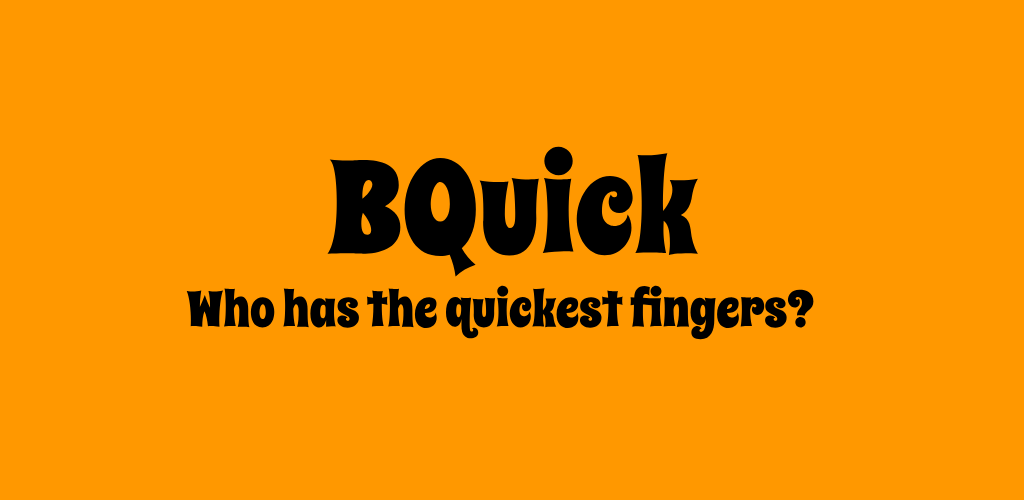
<style>
.page{position:relative;width:1024px;height:500px;background:#ff9800}
.page>*{position:absolute;margin:0}
.t1{font:130px "SpicyRice-Regular";color:#000000}
.t2{font:50px "SpicyRice-Regular";color:#000000}
</style>
<div class="page">
<p class="t1" style="left:327px;top:146px;width:371px;height:131px">BQuick</p>
<p class="t2" style="left:186px;top:285px;width:628px;height:55px">Who has the quickest fingers?</p>
</div>
